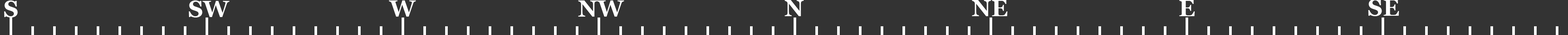
<style>
.page{position:relative;width:1568px;height:35px;background:#333333}
.page>*{position:absolute;margin:0}
.t1{font:23.3px "Georgia-Bold";color:#ffffff;text-transform:uppercase}
</style>
<div class="page">
<p class="t1" style="left:4px;top:0px;width:14px;height:17px">S</p>
<p class="t1" style="left:189px;top:0px;width:41px;height:17px">Sw</p>
<p class="t1" style="left:389px;top:0px;width:27px;height:17px">w</p>
<p class="t1" style="left:578px;top:0px;width:46px;height:17px">NW</p>
<p class="t1" style="left:784px;top:0px;width:20px;height:16px">N</p>
<p class="t1" style="left:972px;top:0px;width:35px;height:16px">NE</p>
<p class="t1" style="left:1179px;top:0px;width:16px;height:16px">E</p>
<p class="t1" style="left:1368px;top:0px;width:31px;height:16px">SE</p>
</div>
